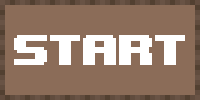
<style>
.page{position:relative;width:200px;height:100px;background:#8b6c58}
.page>*{position:absolute;margin:0}
.t1{font:60px "UpheavalTT-BRK-";color:#ffffff}
</style>
<div class="page">
<p class="t1" style="left:14px;top:35px;width:171px;height:30px">start</p>
</div>
